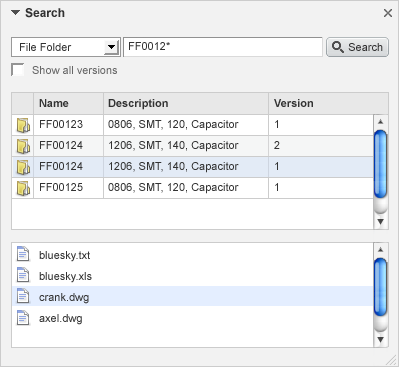
<style>
.page{position:relative;width:399px;height:367px;background:#ffffff}
.page>*{position:absolute;margin:0}
.t1{font:12px "Arial-BoldMT";color:#333333}
.t2{font:11px "ArialMT";color:#333333}
.t3{font:11px "ArialMT";color:#666666}
.t4{font:11px/21px "ArialMT";color:#333333}
.t5{font:11px/21px "Arial-BoldMT";color:#333333}
</style>
<div class="page">
<p class="t1" style="left:25px;top:8px;width:40px;height:10px">Search</p>
<p class="t2" style="left:20px;top:43px;width:52px;height:8px">File Folder</p>
<p class="t2" style="left:129px;top:42px;width:41px;height:8px">FF0012*</p>
<p class="t2" style="left:348px;top:43px;width:35px;height:8px">Search</p>
<p class="t3" style="left:32px;top:66px;width:85px;height:8px">Show all versions</p>
<p class="t4" style="left:39px;top:99px;width:44px;height:92px"><span class="t5">Name<br></span>FF00123<br>FF00124<br>FF00124<br>FF00125</p>
<p class="t4" style="left:108px;top:99px;width:131px;height:95px"><span class="t5">Description<br></span>0806, SMT, 120, Capacitor<br>1206, SMT, 140, Capacitor<br>1206, SMT, 140, Capacitor<br>0806, SMT, 120, Capacitor</p>
<p class="t4" style="left:274px;top:99px;width:39px;height:92px"><span class="t5">Version<br></span>1<br>2 <br>1<br>1</p>
<p class="t4" style="left:39px;top:251px;width:53px;height:74px"><span class="t5"><br></span>bluesky.txt<br>bluesky.xls<br>crank.dwg<br>axel.dwg</p>
</div>
